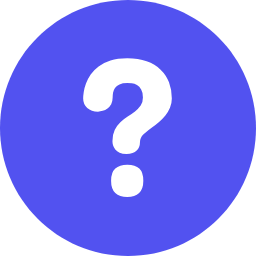
<style>
.page{position:relative;width:256px;height:256px;background:#5252f0}
.page>*{position:absolute;margin:0}
.t1{font:200px "ConcertOne-Regular";color:#ffffff}
</style>
<div class="page">
<p class="t1" style="left:83px;top:58px;width:89px;height:139px">?</p>
</div>
